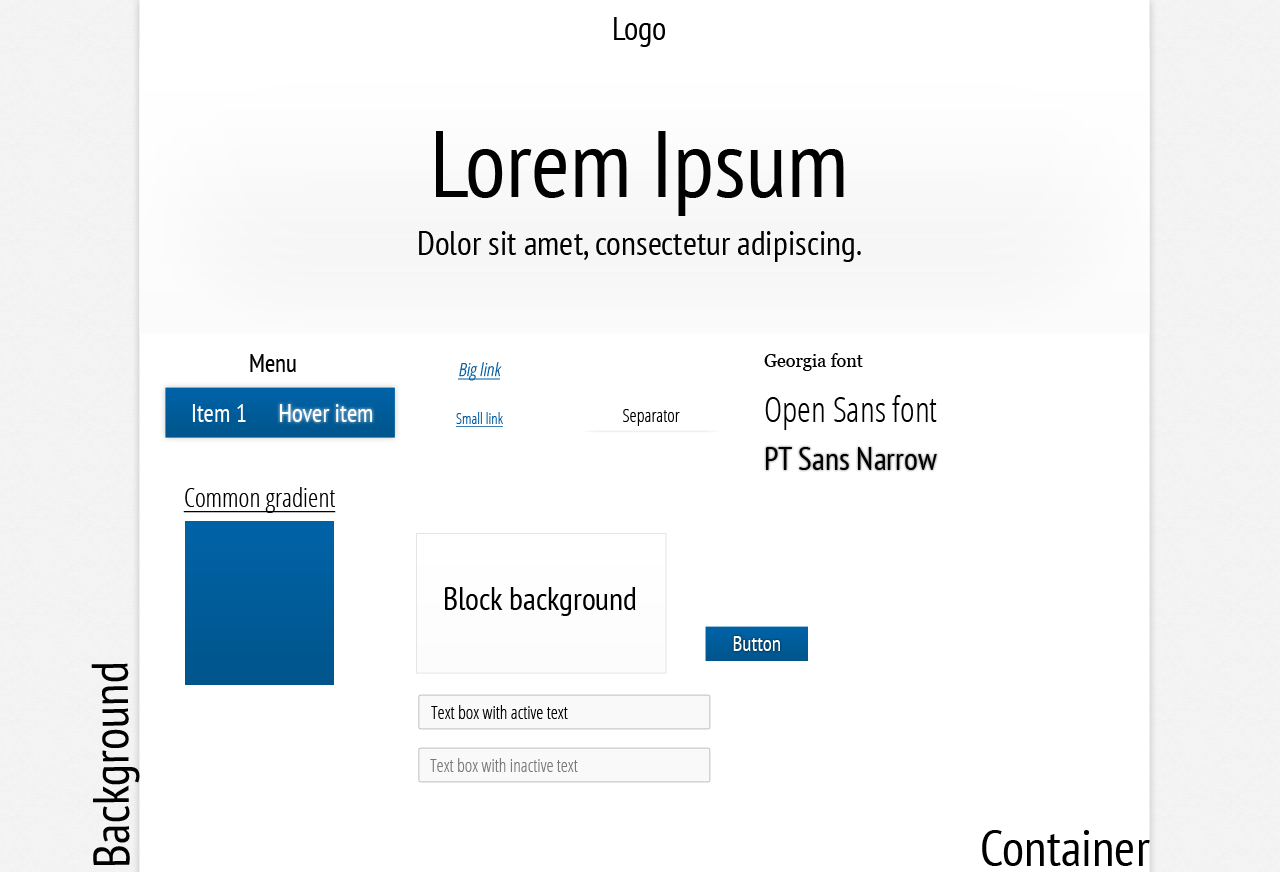
<style>
.page{position:relative;width:1280px;height:872px;background:#ffffff}
.page>*{position:absolute;margin:0}
.t1{font:33px "PTSans-Narrow";color:#000000}
.t2{font:94px "PTSans-Narrow";color:#000000}
.t3{font:34px "PTSans-Narrow";color:#000000}
.t4{font:18px "Georgia";color:#000000}
.t5{font:25px "PTSans-Narrow";color:#000000}
.t6{font:18px "OpenSans-CondensedLight";color:#00589b;font-style:italic;text-decoration:underline}
.t7{font:35px "OpenSans-CondensedLight";color:#000000}
.t8{font:25px "PTSans-Narrow";color:#ffffff}
.t9{font:15px "OpenSans-CondensedLight";color:#00589b;text-decoration:underline}
.t10{font:18px "OpenSans-CondensedLight";color:#000000}
.t11{font:32px "PTSans-Narrow";color:#000000}
.t12{font:26px "OpenSans-CondensedLight";color:#000000;text-decoration:underline}
.t13{font:21px "PTSans-Narrow";color:#ffffff}
.t14{font:51px "PTSans-Narrow";color:#000000}
.t15{font:18px "OpenSans-CondensedLight";color:#797979}
</style>
<div class="page">
<p class="t1" style="left:614px;top:17px;width:51px;height:30px">Logo</p>
<p class="t2" style="left:436px;top:131px;width:408px;height:85px">Lorem Ipsum</p>
<p class="t3" style="left:419px;top:231px;width:442px;height:31px">Dolor sit amet, consectetur adipiscing.</p>
<p class="t4" style="left:764px;top:353px;width:99px;height:18px">Georgia font</p>
<p class="t5" style="left:250px;top:354px;width:46px;height:18px">Menu</p>
<p class="t6" style="left:458px;top:362px;width:44px;height:19px">Big link</p>
<p class="t7" style="left:765px;top:395px;width:172px;height:35px">Open Sans font</p>
<p class="t8" style="left:192px;top:404px;width:54px;height:18px">Item 1</p>
<p class="t8" style="left:279px;top:404px;width:94px;height:18px">Hover item</p>
<p class="t9" style="left:456px;top:412px;width:47px;height:15px">Small link</p>
<p class="t10" style="left:623px;top:409px;width:57px;height:17px">Separator</p>
<p class="t11" style="left:766px;top:447px;width:171px;height:23px">PT Sans Narrow</p>
<p class="t12" style="left:183px;top:487px;width:153px;height:26px">Common gradient</p>
<p class="t11" style="left:445px;top:587px;width:191px;height:29px">Block background</p>
<p class="t13" style="left:733px;top:636px;width:47px;height:15px">Button</p>
<p class="t14" style="left:91px;top:663px;width:49px;height:202px;rotate:-90deg">Background</p>
<p class="t10" style="left:431px;top:705px;width:137px;height:14px">Text box with active text</p>
<p class="t15" style="left:430px;top:758px;width:148px;height:14px">Text box with inactive text</p>
<p class="t14" style="left:982px;top:830px;width:168px;height:36px">Container</p>
</div>
